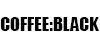
<style>
.page{position:relative;width:100px;height:46px;background:#ffffff}
.page>*{position:absolute;margin:0}
.t1{font:18px "Impact";color:#000000}
</style>
<div class="page">
<p class="t1" style="left:0px;top:17px;width:99px;height:14px">COFFEE:BLACK</p>
</div>
